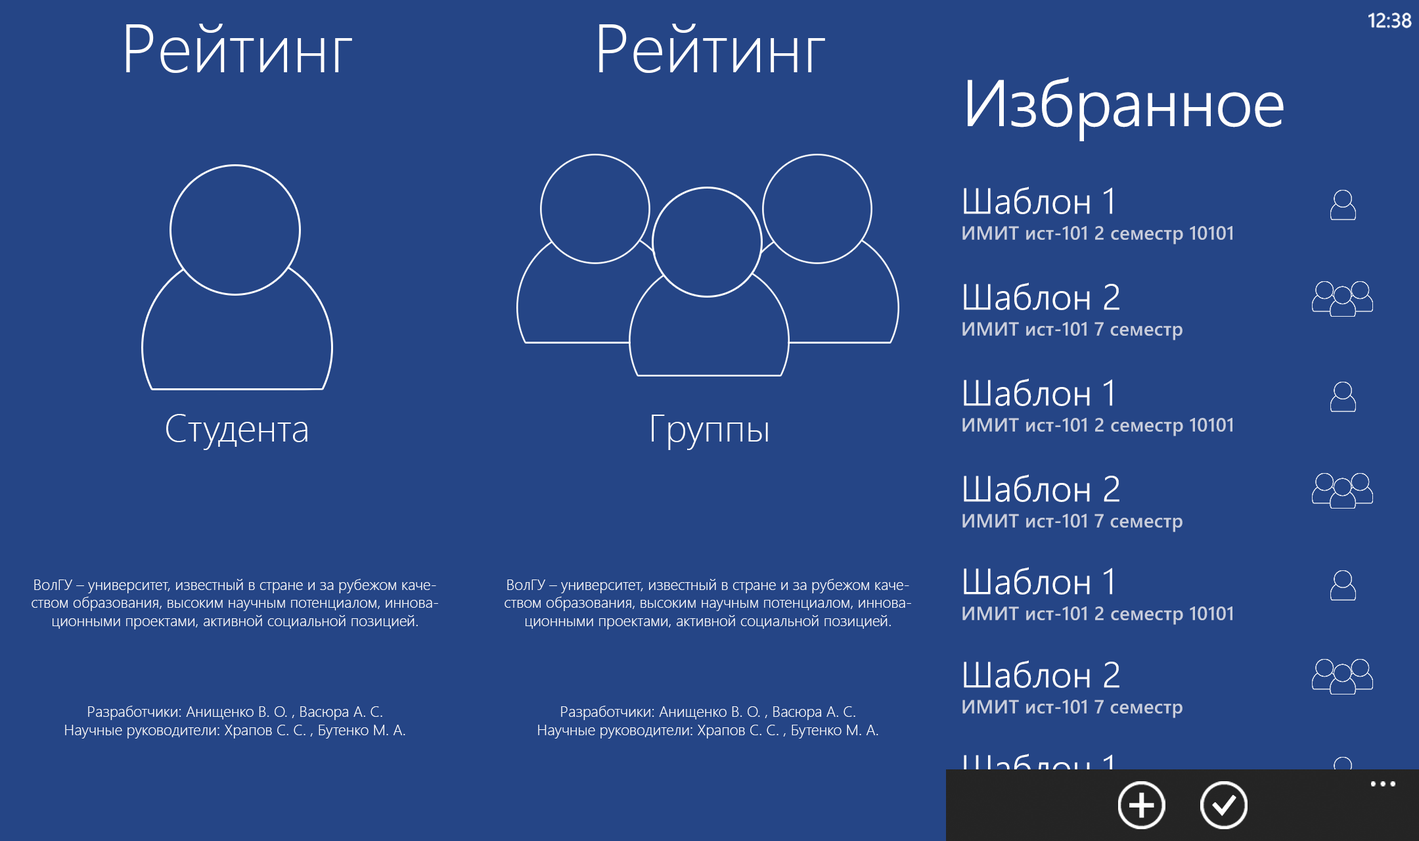
<style>
.page{position:relative;width:1419px;height:841px;background:#254586}
.page>*{position:absolute;margin:0}
.t1{font:68.3px "SegoeUI-Light";color:#ffffff}
.t2{font:65.7px "SegoeWP-SemiLight";letter-spacing:-0.01em;color:#ffffff}
.t3{font:36.3px "SegoeWP-SemiLight";color:#ffffff}
.t4{font:19px "SegoeWP-Semibold";letter-spacing:0.012em;color:#c9cedc}
.t5{font:38.1px "SegoeUI-Light";color:#ffffff}
.t6{font:15.1px "SegoeUI-Light";color:#ffffff}
.t7{font:36.3px "SegoeWP-SemiLight"}
</style>
<div class="page">
<p class="t1" style="left:126px;top:24px;width:226px;height:49px">Рейтинг</p>
<p class="t1" style="left:599px;top:24px;width:226px;height:49px">Рейтинг</p>
<p class="t2" style="left:967px;top:77px;width:316px;height:64px">Избранное</p>
<p class="t3" style="left:963px;top:187px;width:149px;height:27px">Шаблон 1</p>
<p class="t4" style="left:962px;top:226px;width:270px;height:18px">ИМИТ ист-101 2 семестр 10101</p>
<p class="t3" style="left:963px;top:282px;width:156px;height:28px">Шаблон 2</p>
<p class="t4" style="left:962px;top:322px;width:220px;height:18px">ИМИТ ист-101 7 семестр</p>
<p class="t3" style="left:963px;top:378px;width:149px;height:28px">Шаблон 1</p>
<p class="t5" style="left:166px;top:414px;width:141px;height:36px">Студента</p>
<p class="t5" style="left:651px;top:414px;width:117px;height:36px">Группы</p>
<p class="t4" style="left:962px;top:418px;width:270px;height:18px">ИМИТ ист-101 2 семестр 10101</p>
<p class="t3" style="left:963px;top:474px;width:156px;height:28px">Шаблон 2</p>
<p class="t4" style="left:962px;top:514px;width:220px;height:18px">ИМИТ ист-101 7 семестр</p>
<p class="t3" style="left:963px;top:567px;width:149px;height:27px">Шаблон 1</p>
<p class="t6" style="left:32px;top:579px;width:406px;height:159px;text-align:center">ВолГУ – университет, известный в стране и за рубежом качеством образования, высоким научным потенциалом, инновационными проектами, активной социальной позицией. <br><br><br><br><br>Разработчики: Анищенко В. О. , Васюра А. С.<br>Научные руководители: Храпов С. С. , Бутенко М. А.</p>
<p class="t6" style="left:504px;top:579px;width:407px;height:159px;text-align:center">ВолГУ – университет, известный в стране и за рубежом качеством образования, высоким научным потенциалом, инновационными проектами, активной социальной позицией. <br><br><br><br><br>Разработчики: Анищенко В. О. , Васюра А. С.<br>Научные руководители: Храпов С. С. , Бутенко М. А.</p>
<p class="t4" style="left:962px;top:606px;width:270px;height:19px">ИМИТ ист-101 2 семестр 10101</p>
<p class="t3" style="left:963px;top:660px;width:156px;height:28px">Шаблон 2</p>
<p class="t4" style="left:962px;top:699px;width:220px;height:19px">ИМИТ ист-101 7 семестр</p>
<p class="t7" style="left:963px;top:753px;width:149px;height:28px">Шаблон 1</p>
</div>
